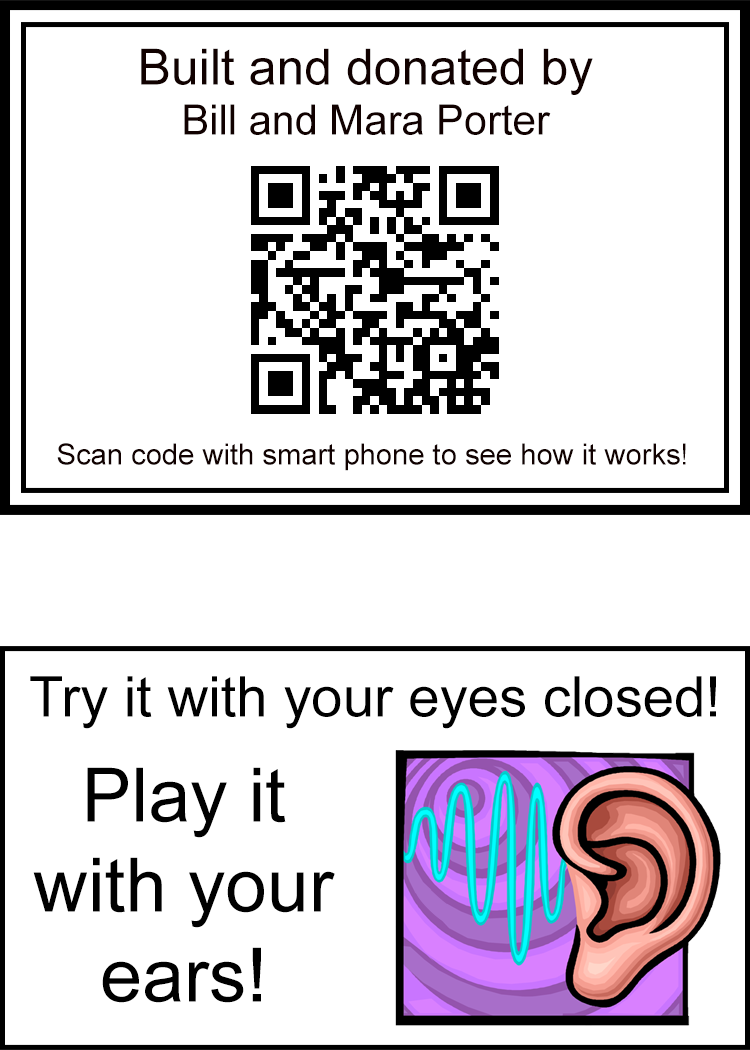
<style>
.page{position:relative;width:750px;height:1050px;background:#ffffff}
.page>*{position:absolute;margin:0}
.t1{font:50px "ArialMT";color:#110100}
.t2{font:41.7px "ArialMT";color:#110100}
.t3{font:29.2px "ArialMT";color:#110100}
.t4{font:56.2px "ArialMT";color:#000000}
.t5{font:75px "ArialMT";color:#000000}
</style>
<div class="page">
<p class="t1" style="left:141px;top:48px;width:452px;height:87px;text-align:center">Built and donated by<br><span class="t2">Bill and Mara Porter</span></p>
<p class="t3" style="left:57px;top:443px;width:629px;height:28px">Scan code with smart phone to see how it works!</p>
<p class="t4" style="left:30px;top:676px;width:686px;height:53px">Try it with your eyes closed!</p>
<p class="t5" style="left:33px;top:767px;width:302px;height:236px;text-align:center">Play it<br>with your<br>ears!</p>
</div>
